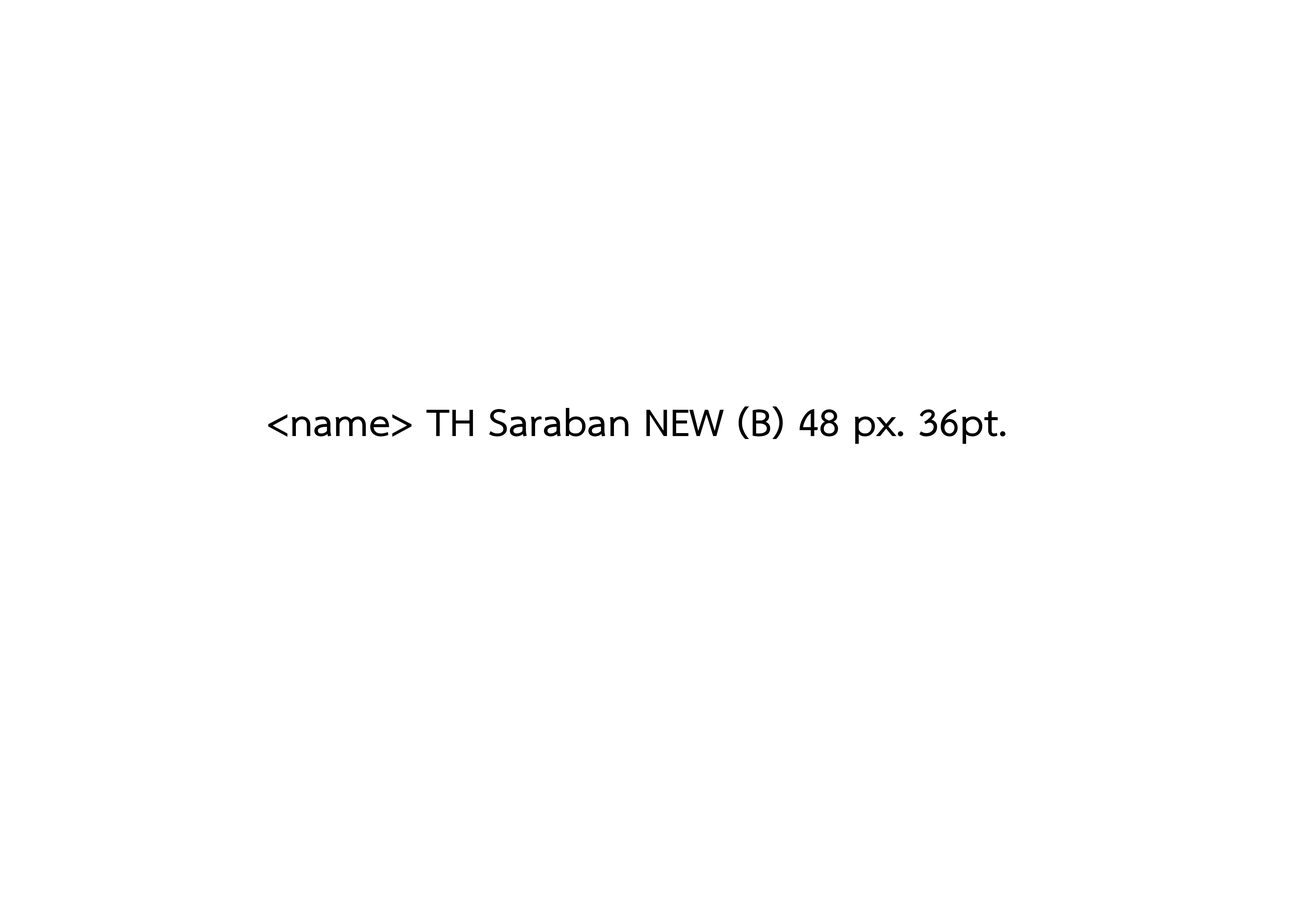
<style>
.page{position:relative;width:1299px;height:918px;background:#ffffff}
.page>*{position:absolute;margin:0}
.t1{font:55.5px "THSarabunNew-Bold";color:#000000}
</style>
<div class="page">
<p class="t1" style="left:268px;top:407px;width:738px;height:37px">&lt;name&gt; TH Saraban NEW (B) 48 px. 36pt.</p>
</div>
